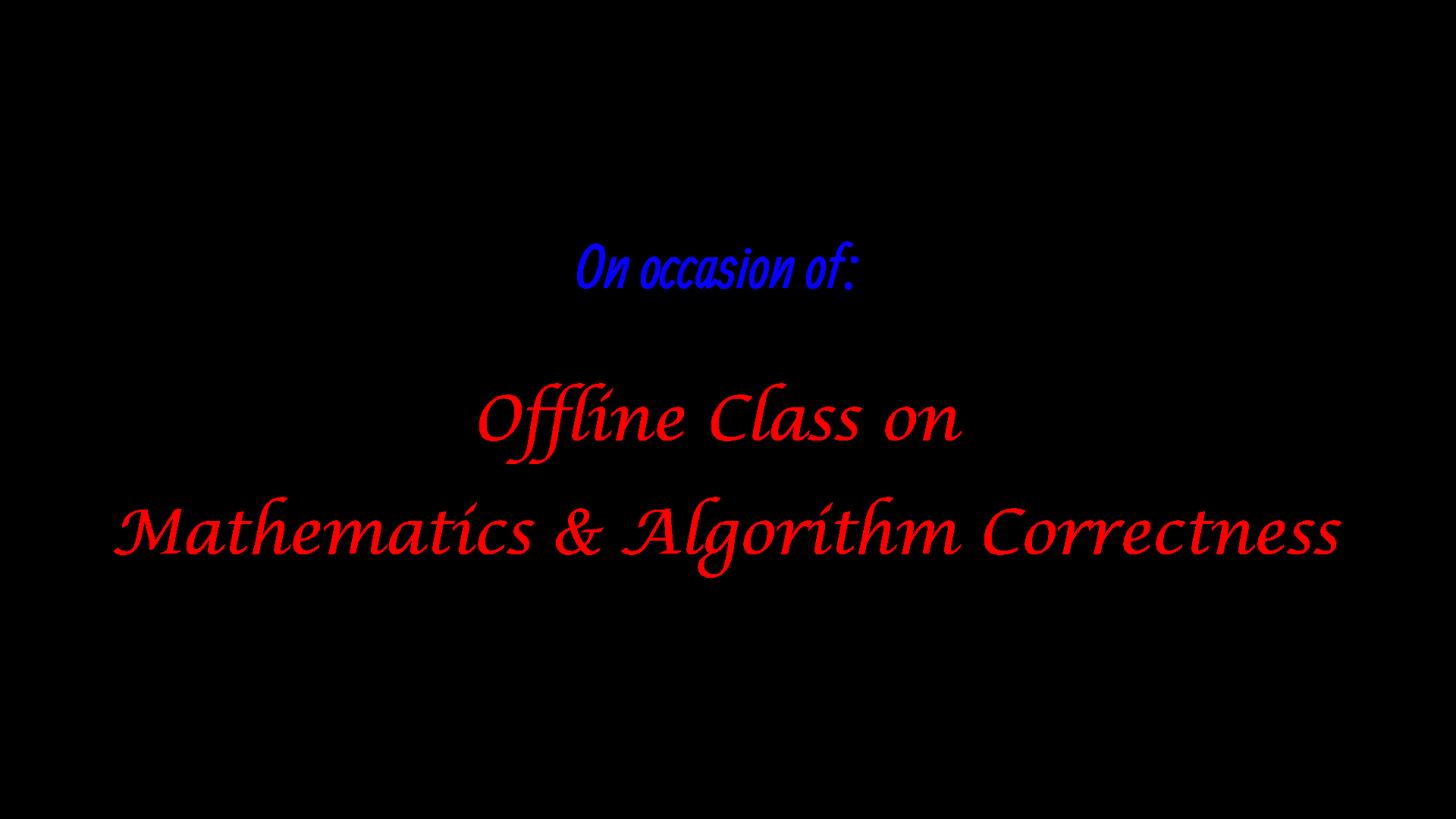
<style>
.page{position:relative;width:1456px;height:819px;background:#000000}
.page>*{position:absolute;margin:0}
.t1{font:60.7px/113.7px "LucidaCalligraphy-Regular";color:#ff0000}
.t2{font:60.7px/151.7px "Allan-Regular";color:#0800ff}
.t3{font:60.7px/151.7px "LucidaCalligraphy-Regular";color:#ff0000}
</style>
<div class="page">
<p class="t1" style="left:114px;top:241px;width:1228px;height:337px;text-align:center"><span class="t2">On occasion of: <br></span><span class="t3">Offline Class on <br></span>Mathematics &amp; Algorithm Correctness</p>
</div>
